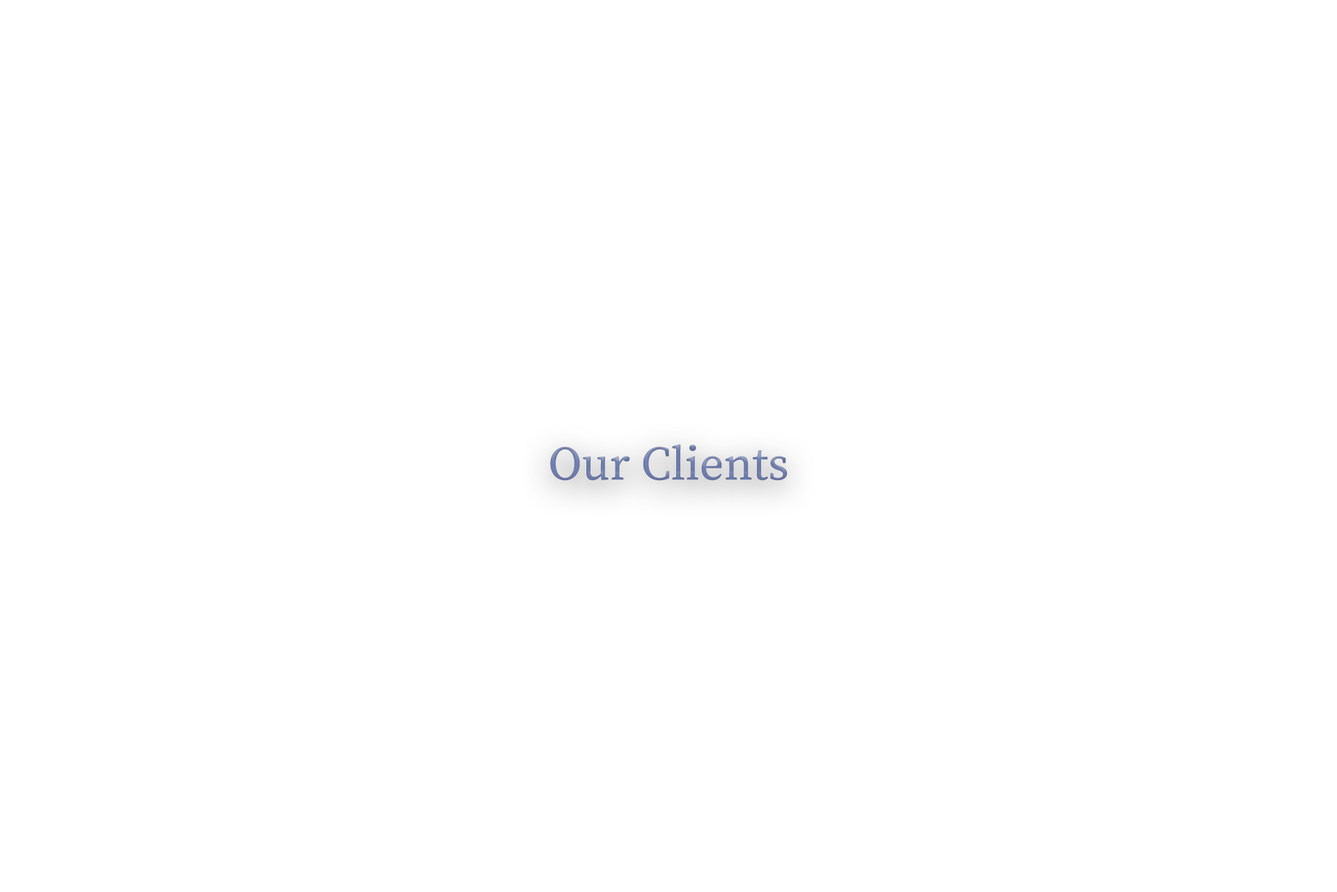
<style>
.page{position:relative;width:1337px;height:892px;background:#ffffff}
.page>*{position:absolute;margin:0}
.t1{font:47.7px "SourceSerifRoman-Regular";color:#6e7ba9}
</style>
<div class="page">
<p class="t1" style="left:550px;top:444px;width:238px;height:37px">Our Clients</p>
</div>
